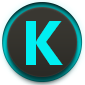
<style>
.page{position:relative;width:85px;height:85px}
.page>*{position:absolute;margin:0}
.t1{font:63.3px "Ebrima-Bold";color:#00eff2}
</style>
<div class="page">
<p class="t1" style="left:26px;top:21px;width:37px;height:44px">K</p>
</div>
